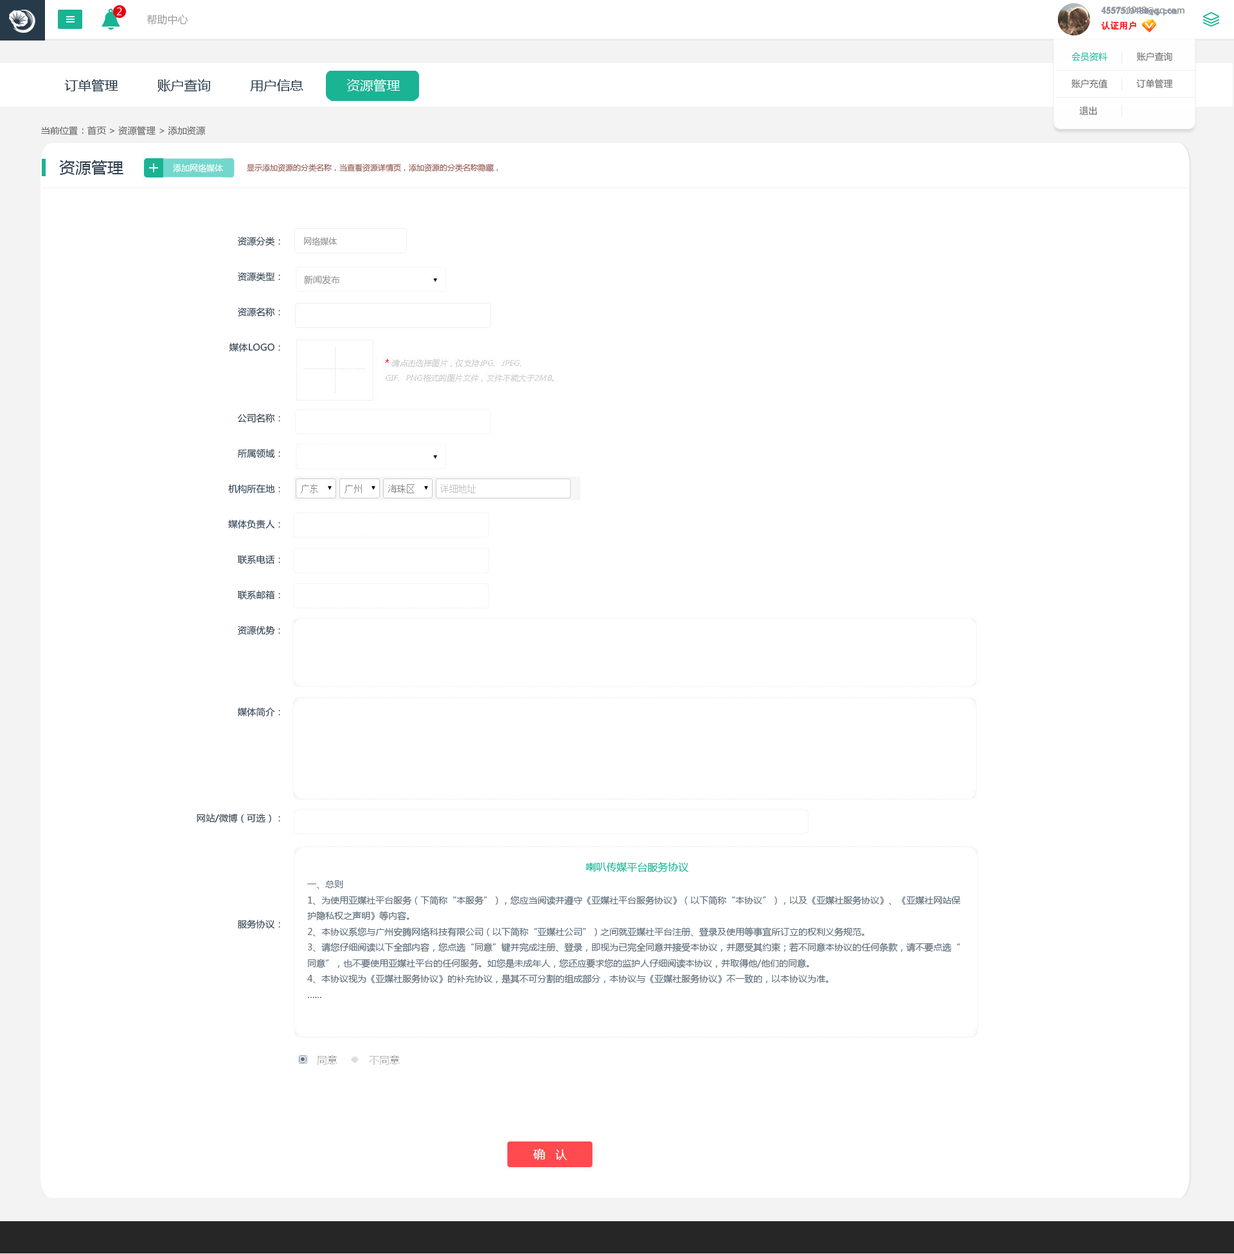
<style>
.page{position:relative;width:1234px;height:1254px;background:#ffffff}
.page>*{position:absolute;margin:0}
.t1{font:10.3px "MicrosoftYaHei";color:#ffffff}
.t2{font:10.3px "MicrosoftYaHei";color:#999999}
.t3{font:9px/15.4px "AdobeHeitiStd-Regular";color:#999999}
.t4{font:9px/15.4px "AdobeHeitiStd-Regular";color:#f61e1e}
.t5{font:9px/15.4px "AdobeHeitiStd-Regular";color:#ffffff}
.t6{font:9px/15.4px "SimSun";color:#8894a4;font-weight:bold}
.t7{font:9px/15.4px "SimSun";color:#f61e1e}
.t8{font:9px/27px "MicrosoftYaHei";color:#666666}
.t9{font:9px/27px "MicrosoftYaHei";color:#1ab394}
.t10{font:12.9px "MicrosoftYaHei";color:#2f4050;scale:1.04 1}
.t11{font:12.9px "MicrosoftYaHei";color:#273a4a;scale:1.04 1}
.t12{font:12.9px "MicrosoftYaHei";color:#ffffff;scale:1.04 1}
.t13{font:9px "MicrosoftYaHei";color:#666666;scale:1.04 1}
.t14{font:15.4px "MicrosoftYaHei";color:#2f4050;scale:1.04 1}
.t15{font:7.7px "MicrosoftYaHei";color:#9a625c}
.t16{font:9px/35.4px "MicrosoftYaHei";color:#2f4050;scale:1.03 1}
.t17{font:8.4px "MicrosoftYaHei";color:#999999}
.t18{font:9px "MicrosoftYaHei";color:#999999}
.t19{font:9px "MicrosoftYaHei";color:#5c6b78}
.t20{font:10.3px "MicrosoftYaHei";color:#1ab394}
</style>
<div class="page">
<p class="t1" style="left:116px;top:7px;width:6px;height:8px">2</p>
<p class="t2" style="left:147px;top:14px;width:41px;height:11px">帮助中心</p>
<p class="t3" style="left:1101px;top:6px;width:84px;height:24px">455751948@qq.com<br><span class="t4">认证用户               </span><span class="t5">退出</span></p>
<p class="t6" style="left:1101px;top:7px;width:77px;height:23px">455751948@qq.com<br><span class="t7">认证用户</span></p>
<p class="t8" style="left:1072px;top:52px;width:101px;height:63px"><span class="t9">会员资料</span>           账户查询<br>账户充值           订单管理           <br>   退出</p>
<p class="t10" style="left:64px;top:79px;width:337px;height:13px"><span class="t11">订单管理          </span>账户查询          用户信息           <span class="t12">资源管理</span></p>
<p class="t13" style="left:41px;top:126px;width:165px;height:9px">当前位置：首页 &gt; 资源管理 &gt; 添加资源</p>
<p class="t14" style="left:59px;top:160px;width:64px;height:15px">资源管理</p>
<p class="t15" style="left:247px;top:163px;width:251px;height:9px">显示添加资源的分类名称，当查看资源详情页，添加资源的分类名称隐藏，</p>
<p class="t16" style="left:197px;top:237px;width:83px;height:691px;text-align:right">资源分类：<br>资源类型：<br>资源名称：<br>媒体LOGO：<br><br>公司名称：<br>所属领域：<br>机构所在地：<br>媒体负责人：<br>联系电话：<br>联系邮箱：<br>资源优势：<br><br><br>媒体简介：<br><br><br>网站/微博（可选）：<br><br><br>服务协议：</p>
<p class="t17" style="left:304px;top:237px;width:34px;height:9px">网络媒体</p>
<p class="t18" style="left:304px;top:275px;width:36px;height:9px">新闻发布</p>
<p class="t19" style="left:307px;top:861px;width:654px;height:137px;text-align:center"><span class="t20">喇叭传媒平台服务协议<br></span>一、总则<br>1、为使用亚媒社平台服务（下简称“本服务”），您应当阅读并遵守《亚媒社平台服务协议》（以下简称“本协议”），以及《亚媒社服务协议》、《亚媒社网站保护隐私权之声明》等内容。<br>2、本协议系您与广州安腾网络科技有限公司（以下简称“亚媒社公司”）之间就亚媒社平台注册、登录及使用等事宜所订立的权利义务规范。<br>3、请您仔细阅读以下全部内容，您点选“同意”键并完成注册、登录，即视为已完全同意并接受本协议，并愿受其约束；若不同意本协议的任何条款，请不要点选“同意”，也不要使用亚媒社平台的任何服务。如您是未成年人，您还应要求您的监护人仔细阅读本协议，并取得他/他们的同意。<br>4、本协议视为《亚媒社服务协议》的补充协议，是其不可分割的组成部分，本协议与《亚媒社服务协议》不一致的，以本协议为准。<br>……</p>
</div>
